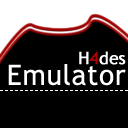
<style>
.page{position:relative;width:128px;height:128px;background:#000000}
.page>*{position:absolute;margin:0}
.t1{font:17px "TrebuchetMS";color:#ffffff;font-weight:bold}
.t2{font:17px "TrebuchetMS";color:#b20000;font-weight:bold}
.t3{font:28px "TrebuchetMS";color:#ffffff;font-weight:bold}
</style>
<div class="page">
<p class="t1" style="left:79px;top:51px;width:47px;height:14px">H<span class="t2">4</span>des</p>
<p class="t3" style="left:8px;top:64px;width:118px;height:22px">Emulator</p>
</div>
